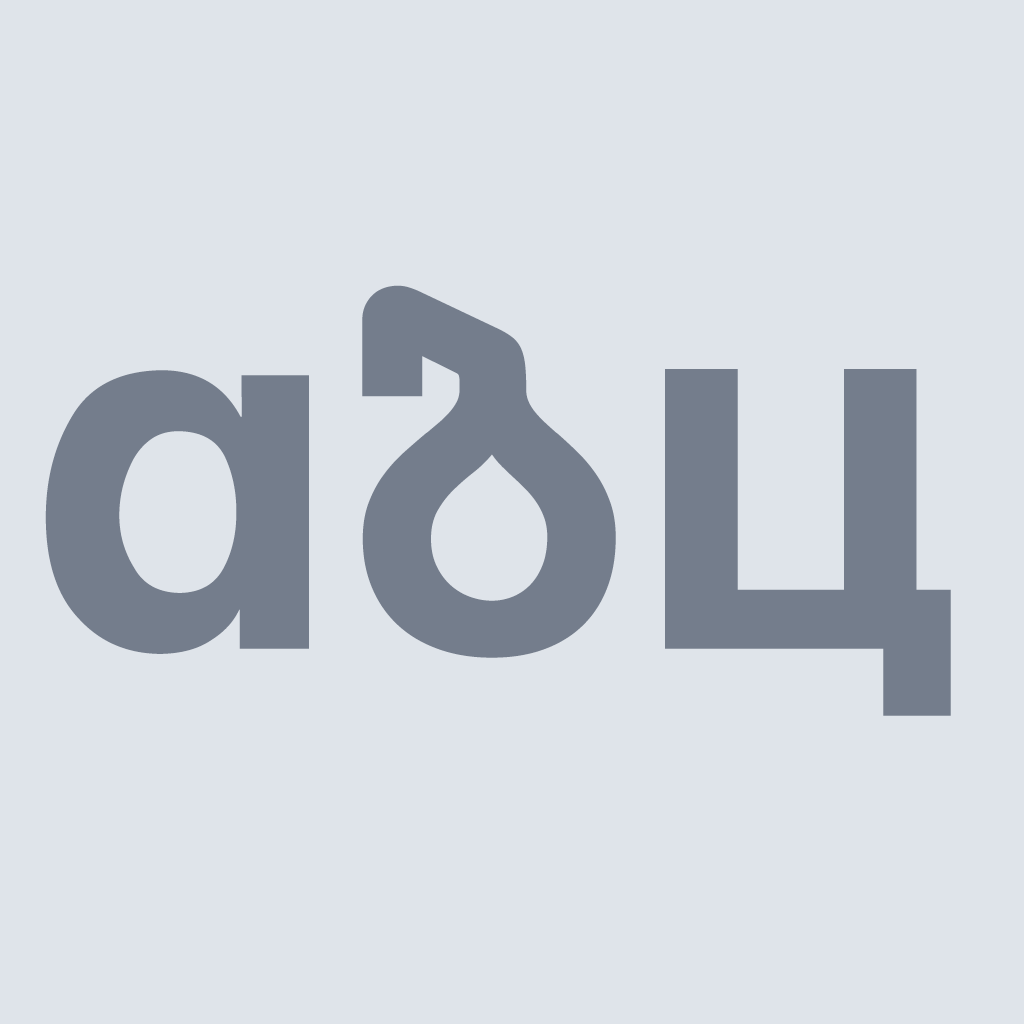
<style>
.page{position:relative;width:1024px;height:1024px;background:#dfe4ea}
.page>*{position:absolute;margin:0}
.t1{font:525px "Helvetica-Bold";color:#747d8c}
</style>
<div class="page">
<p class="t1" style="left:45px;top:285px;width:906px;height:431px">αბц</p>
</div>
